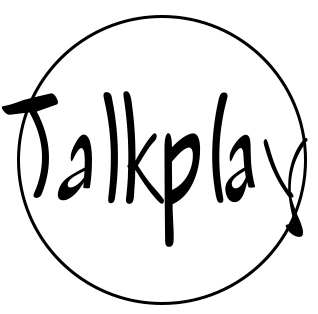
<style>
.page{position:relative;width:318px;height:314px;background:#ffffff}
.page>*{position:absolute;margin:0}
.t1{font:136.3px "StylusBT";color:#ffffff;scale:0.83 1}
</style>
<div class="page">
<p class="t1" style="left:1px;top:91px;width:307px;height:156px">Talkplay</p>
</div>
